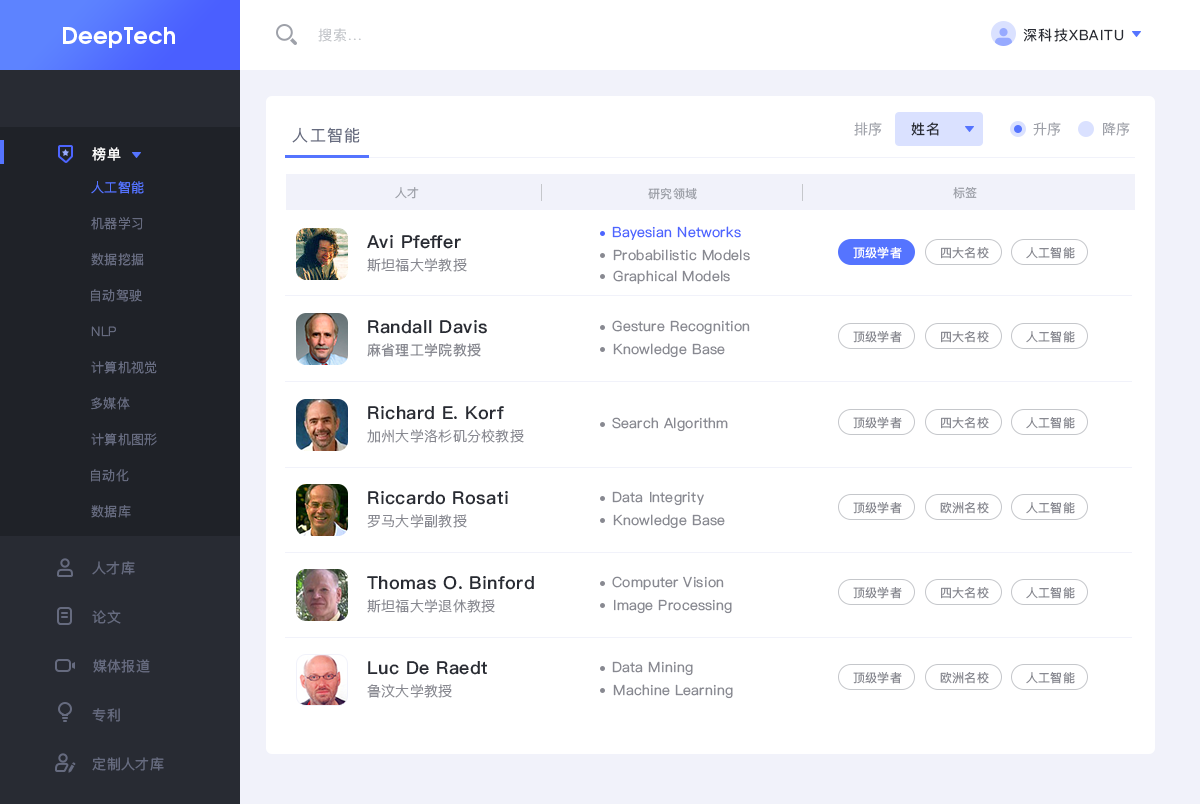
<style>
.page{position:relative;width:1200px;height:804px;background:#ffffff}
.page>*{position:absolute;margin:0}
.t1{font:22.6px "AvantGardeGothicC-Demi";letter-spacing:0.02em;color:#ffffff}
.t2{font:14px "PingFangSC-Light";letter-spacing:0.08em;color:#c5c7cb}
.t3{font:14px "PingFangSC-Regular";letter-spacing:0.08em;color:#282b33}
.t4{font:14px "PingFangSC-Light";letter-spacing:0.03em;color:#9ea1a9}
.t5{font:14px "PingFangSC-Regular";letter-spacing:0.03em;color:#282b33}
.t6{font:16px "PingFangSC-Regular";letter-spacing:0.08em;color:#666b7f}
.t7{font:14px "PingFangSC-Regular";letter-spacing:0.03em;color:#ffffff}
.t8{font:13px "PingFangSC-Light";letter-spacing:0.02em;color:#5574ff}
.t9{font:12px "PingFangSC-Regular";letter-spacing:0.03em;color:#9ea1a9}
.t10{font:13px "PingFangSC-Light";letter-spacing:0.02em;color:#666b7f}
.t11{font:14px "PingFangSC-Regular";letter-spacing:0.02em;color:#4d65ff}
.t12{font:18px "PingFangSC-Semibold";letter-spacing:0.02em;color:#282b33}
.t13{font:14px "PingFangSC-Regular";letter-spacing:0.02em;color:#888991}
.t14{font:12px "PingFangSC-Regular";letter-spacing:0.02em;color:#ffffff}
.t15{font:12px "PingFangSC-Regular";letter-spacing:0.02em;color:#888991}
.t16{font:14px "PingFangSC-Light";letter-spacing:0.02em;color:#888991}
.t17{font:14px "PingFangSC-Regular";letter-spacing:0.03em;color:#666b7f}
</style>
<div class="page">
<p class="t1" style="left:63px;top:27px;width:112px;height:21px">DeepTech</p>
<p class="t2" style="left:318px;top:28px;width:43px;height:14px">搜索...</p>
<p class="t3" style="left:1023px;top:28px;width:101px;height:14px">深科技XBAITU</p>
<p class="t4" style="left:854px;top:122px;width:28px;height:14px">排序</p>
<p class="t5" style="left:911px;top:122px;width:28px;height:14px">姓名</p>
<p class="t4" style="left:1033px;top:122px;width:28px;height:14px">升序</p>
<p class="t4" style="left:1103px;top:122px;width:27px;height:14px">降序</p>
<p class="t6" style="left:292px;top:127px;width:68px;height:16px">人工智能</p>
<p class="t7" style="left:92px;top:147px;width:29px;height:14px">榜单</p>
<p class="t8" style="left:91px;top:181px;width:53px;height:13px">人工智能</p>
<p class="t9" style="left:395px;top:187px;width:24px;height:12px">人才</p>
<p class="t9" style="left:648px;top:188px;width:49px;height:12px">研究领域</p>
<p class="t9" style="left:953px;top:187px;width:24px;height:12px">标签</p>
<p class="t10" style="left:91px;top:217px;width:52px;height:13px">机器学习</p>
<p class="t11" style="left:612px;top:226px;width:129px;height:14px">Bayesian Networks</p>
<p class="t12" style="left:367px;top:235px;width:94px;height:14px">Avi Pfeffer</p>
<p class="t10" style="left:91px;top:253px;width:53px;height:13px">数据挖掘</p>
<p class="t13" style="left:613px;top:249px;width:137px;height:12px">Probabilistic Models</p>
<p class="t14" style="left:853px;top:247px;width:49px;height:12px">顶级学者</p>
<p class="t15" style="left:941px;top:247px;width:48px;height:12px">四大名校</p>
<p class="t15" style="left:1026px;top:247px;width:49px;height:12px">人工智能</p>
<p class="t16" style="left:367px;top:258px;width:100px;height:14px">斯坦福大学教授</p>
<p class="t13" style="left:613px;top:270px;width:117px;height:14px">Graphical Models</p>
<p class="t10" style="left:91px;top:289px;width:51px;height:13px">自动驾驶</p>
<p class="t10" style="left:91px;top:326px;width:25px;height:11px">NLP</p>
<p class="t12" style="left:368px;top:320px;width:119px;height:14px">Randall Davis</p>
<p class="t13" style="left:612px;top:320px;width:138px;height:15px">Gesture Recognition</p>
<p class="t15" style="left:853px;top:331px;width:49px;height:12px">顶级学者</p>
<p class="t15" style="left:941px;top:331px;width:48px;height:12px">四大名校</p>
<p class="t15" style="left:1026px;top:331px;width:49px;height:12px">人工智能</p>
<p class="t13" style="left:367px;top:343px;width:114px;height:14px">麻省理工学院教授</p>
<p class="t13" style="left:613px;top:343px;width:112px;height:15px">Knowledge Base</p>
<p class="t10" style="left:91px;top:361px;width:66px;height:13px">计算机视觉</p>
<p class="t10" style="left:91px;top:397px;width:39px;height:13px">多媒体</p>
<p class="t12" style="left:368px;top:406px;width:136px;height:14px">Richard E. Korf</p>
<p class="t13" style="left:612px;top:417px;width:116px;height:15px">Search Algorithm</p>
<p class="t15" style="left:853px;top:417px;width:49px;height:12px">顶级学者</p>
<p class="t15" style="left:941px;top:417px;width:48px;height:12px">四大名校</p>
<p class="t15" style="left:1026px;top:417px;width:49px;height:12px">人工智能</p>
<p class="t10" style="left:91px;top:433px;width:66px;height:13px">计算机图形</p>
<p class="t16" style="left:367px;top:429px;width:157px;height:14px">加州大学洛杉矶分校教授</p>
<p class="t10" style="left:91px;top:469px;width:38px;height:13px">自动化</p>
<p class="t12" style="left:368px;top:491px;width:140px;height:14px">Riccardo Rosati</p>
<p class="t13" style="left:612px;top:491px;width:92px;height:15px">Data Integrity</p>
<p class="t10" style="left:91px;top:505px;width:40px;height:13px">数据库</p>
<p class="t15" style="left:853px;top:502px;width:49px;height:12px">顶级学者</p>
<p class="t15" style="left:940px;top:502px;width:49px;height:12px">欧洲名校</p>
<p class="t15" style="left:1026px;top:502px;width:49px;height:12px">人工智能</p>
<p class="t16" style="left:367px;top:514px;width:100px;height:14px">罗马大学副教授</p>
<p class="t13" style="left:613px;top:514px;width:112px;height:15px">Knowledge Base</p>
<p class="t17" style="left:92px;top:561px;width:43px;height:14px">人才库</p>
<p class="t12" style="left:367px;top:576px;width:167px;height:14px">Thomas O. Binford</p>
<p class="t13" style="left:612px;top:576px;width:112px;height:14px">Computer Vision</p>
<p class="t15" style="left:853px;top:587px;width:49px;height:12px">顶级学者</p>
<p class="t15" style="left:941px;top:587px;width:48px;height:12px">四大名校</p>
<p class="t15" style="left:1026px;top:587px;width:49px;height:12px">人工智能</p>
<p class="t16" style="left:367px;top:599px;width:128px;height:14px">斯坦福大学退休教授</p>
<p class="t13" style="left:614px;top:599px;width:118px;height:15px">Image Processing</p>
<p class="t17" style="left:92px;top:610px;width:29px;height:14px">论文</p>
<p class="t17" style="left:93px;top:659px;width:57px;height:14px">媒体报道</p>
<p class="t12" style="left:368px;top:661px;width:119px;height:14px">Luc De Raedt</p>
<p class="t13" style="left:612px;top:661px;width:81px;height:15px">Data Mining</p>
<p class="t15" style="left:853px;top:672px;width:49px;height:12px">顶级学者</p>
<p class="t15" style="left:940px;top:672px;width:49px;height:12px">欧洲名校</p>
<p class="t15" style="left:1026px;top:672px;width:49px;height:12px">人工智能</p>
<p class="t16" style="left:367px;top:684px;width:85px;height:14px">鲁汶大学教授</p>
<p class="t13" style="left:613px;top:684px;width:120px;height:15px">Machine Learning</p>
<p class="t17" style="left:92px;top:708px;width:28px;height:14px">专利</p>
<p class="t17" style="left:92px;top:757px;width:72px;height:14px">定制人才库</p>
</div>
